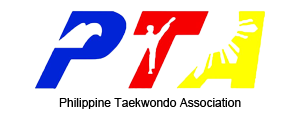
<style>
.page{position:relative;width:300px;height:120px;background:#ffffff}
.page>*{position:absolute;margin:0}
.t1{font:12px "ArialMT";color:#000000}
</style>
<div class="page">
<p class="t1" style="left:59px;top:98px;width:182px;height:11px">Philippine Taekwondo Association</p>
</div>
